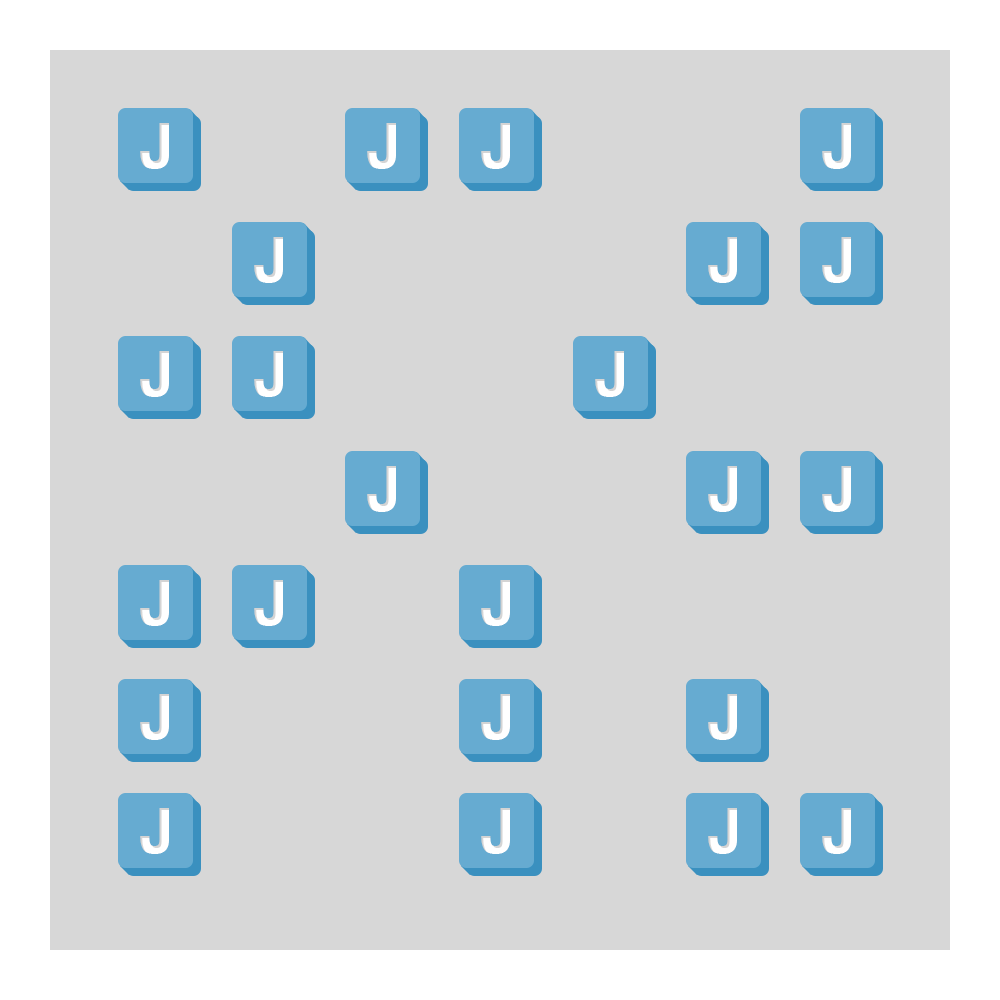
<style>
.page{position:relative;width:1000px;height:1000px;background:#d7d7d7}
.page>*{position:absolute;margin:0}
.t1{font:62px "Helvetica-Bold";color:#ffffff}
</style>
<div class="page">
<p class="t1" style="left:140px;top:123px;width:29px;height:46px">J</p>
<p class="t1" style="left:367px;top:123px;width:29px;height:46px">J</p>
<p class="t1" style="left:481px;top:123px;width:29px;height:46px">J</p>
<p class="t1" style="left:822px;top:123px;width:29px;height:46px">J</p>
<p class="t1" style="left:254px;top:237px;width:29px;height:46px">J</p>
<p class="t1" style="left:708px;top:237px;width:29px;height:46px">J</p>
<p class="t1" style="left:822px;top:237px;width:29px;height:46px">J</p>
<p class="t1" style="left:140px;top:351px;width:29px;height:46px">J</p>
<p class="t1" style="left:254px;top:351px;width:29px;height:46px">J</p>
<p class="t1" style="left:595px;top:351px;width:29px;height:46px">J</p>
<p class="t1" style="left:367px;top:466px;width:29px;height:46px">J</p>
<p class="t1" style="left:708px;top:466px;width:29px;height:46px">J</p>
<p class="t1" style="left:822px;top:466px;width:29px;height:46px">J</p>
<p class="t1" style="left:140px;top:580px;width:29px;height:46px">J</p>
<p class="t1" style="left:254px;top:580px;width:29px;height:46px">J</p>
<p class="t1" style="left:481px;top:580px;width:29px;height:46px">J</p>
<p class="t1" style="left:140px;top:694px;width:29px;height:46px">J</p>
<p class="t1" style="left:481px;top:694px;width:29px;height:46px">J</p>
<p class="t1" style="left:708px;top:694px;width:29px;height:46px">J</p>
<p class="t1" style="left:140px;top:808px;width:29px;height:46px">J</p>
<p class="t1" style="left:481px;top:808px;width:29px;height:46px">J</p>
<p class="t1" style="left:708px;top:808px;width:29px;height:46px">J</p>
<p class="t1" style="left:822px;top:808px;width:29px;height:46px">J</p>
</div>
